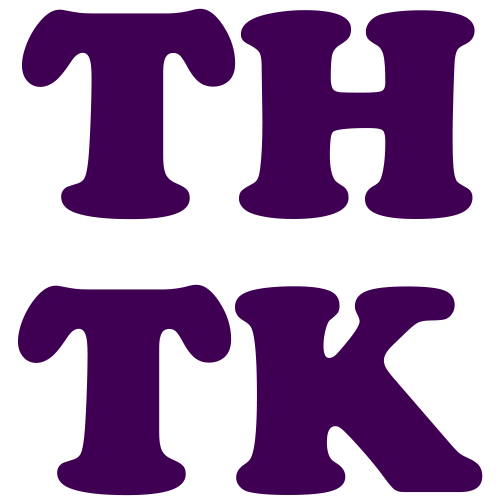
<style>
.page{position:relative;width:500px;height:500px;background:#ffffff}
.page>*{position:absolute;margin:0}
.t1{font:303.9px/276.3px "UTM-Cooper-Black";color:#3f0054}
</style>
<div class="page">
<p class="t1" style="left:18px;top:8px;width:465px;height:488px;text-align:center">TH<br>TK</p>
</div>
